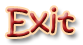
<style>
.page{position:relative;width:83px;height:45px;background:#ffffff}
.page>*{position:absolute;margin:0}
.t1{font:33px "KristenITC-Regular"}
</style>
<div class="page">
<p class="t1" style="left:6px;top:7px;width:68px;height:30px">Exit</p>
</div>
